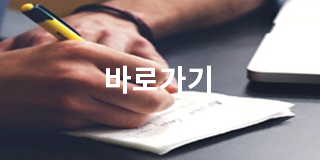
<style>
.page{position:relative;width:320px;height:160px}
.page>*{position:absolute;margin:0}
.t1{font:30px "NotoSansKR-Bold";color:#ffffff;text-transform:uppercase}
</style>
<div class="page">
<p class="t1" style="left:106px;top:65px;width:105px;height:29px">바로가기</p>
</div>
